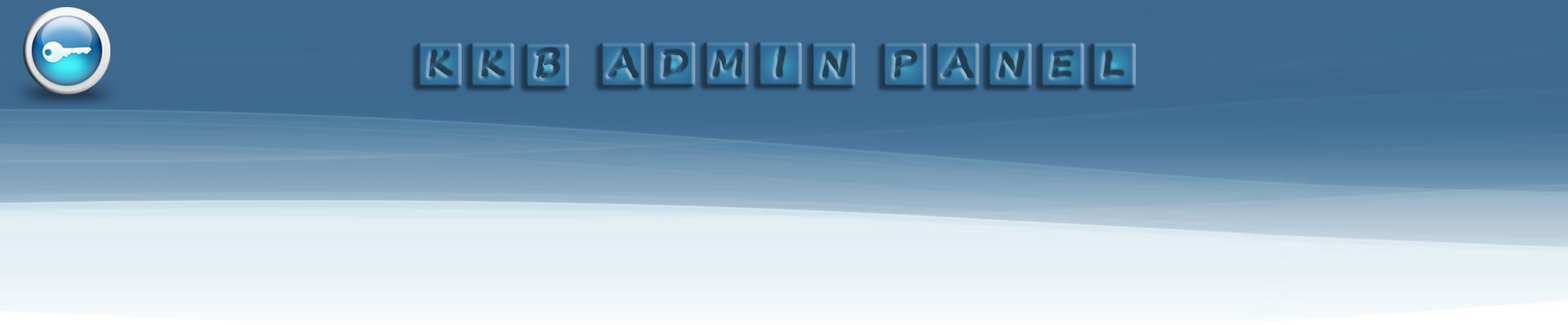
<style>
.page{position:relative;width:1568px;height:325px}
.page>*{position:absolute;margin:0}
.t1{font:41.8px "kidsboardgamefont"}
</style>
<div class="page">
<p class="t1" style="left:650px;top:42px;width:45px;height:45px">D</p>
<p class="t1" style="left:703px;top:42px;width:46px;height:45px">M</p>
<p class="t1" style="left:757px;top:42px;width:45px;height:45px">I</p>
<p class="t1" style="left:416px;top:42px;width:46px;height:46px">K</p>
<p class="t1" style="left:469px;top:42px;width:45px;height:46px">K</p>
<p class="t1" style="left:524px;top:43px;width:45px;height:46px">B</p>
<p class="t1" style="left:599px;top:42px;width:45px;height:46px">A</p>
<p class="t1" style="left:810px;top:42px;width:45px;height:46px">N</p>
<p class="t1" style="left:881px;top:42px;width:46px;height:46px">P</p>
<p class="t1" style="left:934px;top:42px;width:45px;height:46px">A</p>
<p class="t1" style="left:986px;top:42px;width:46px;height:46px">N</p>
<p class="t1" style="left:1039px;top:42px;width:45px;height:46px">E</p>
<p class="t1" style="left:1091px;top:42px;width:45px;height:46px">L</p>
</div>
